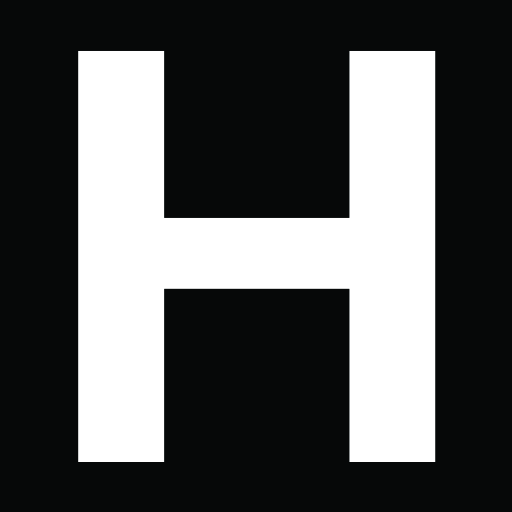
<style>
.page{position:relative;width:512px;height:512px;background:#060808}
.page>*{position:absolute;margin:0}
.t1{font:583.3px "SFProDisplay-Bold";color:#ffffff}
</style>
<div class="page">
<p class="t1" style="left:78px;top:50px;width:358px;height:412px">H</p>
</div>
